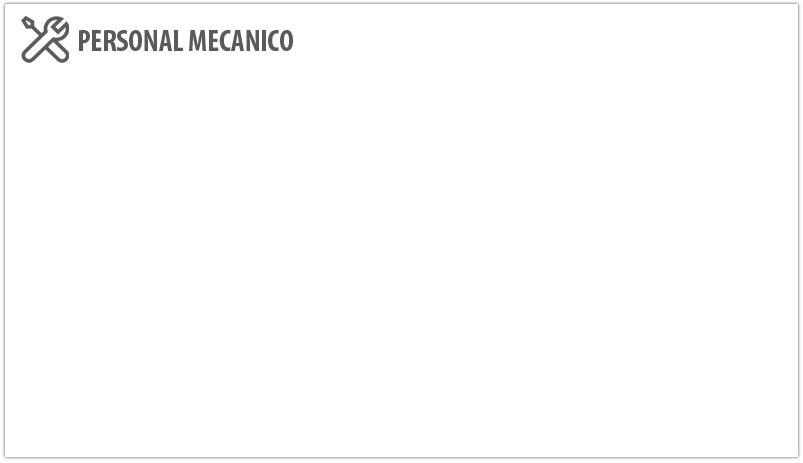
<style>
.page{position:relative;width:803px;height:463px;background:#ffffff}
.page>*{position:absolute;margin:0}
.t1{font:30px "MyriadPro-BoldCond";color:#5a5a5a}
</style>
<div class="page">
<p class="t1" style="left:79px;top:30px;width:214px;height:21px">PERSONAL MECANICO</p>
</div>
